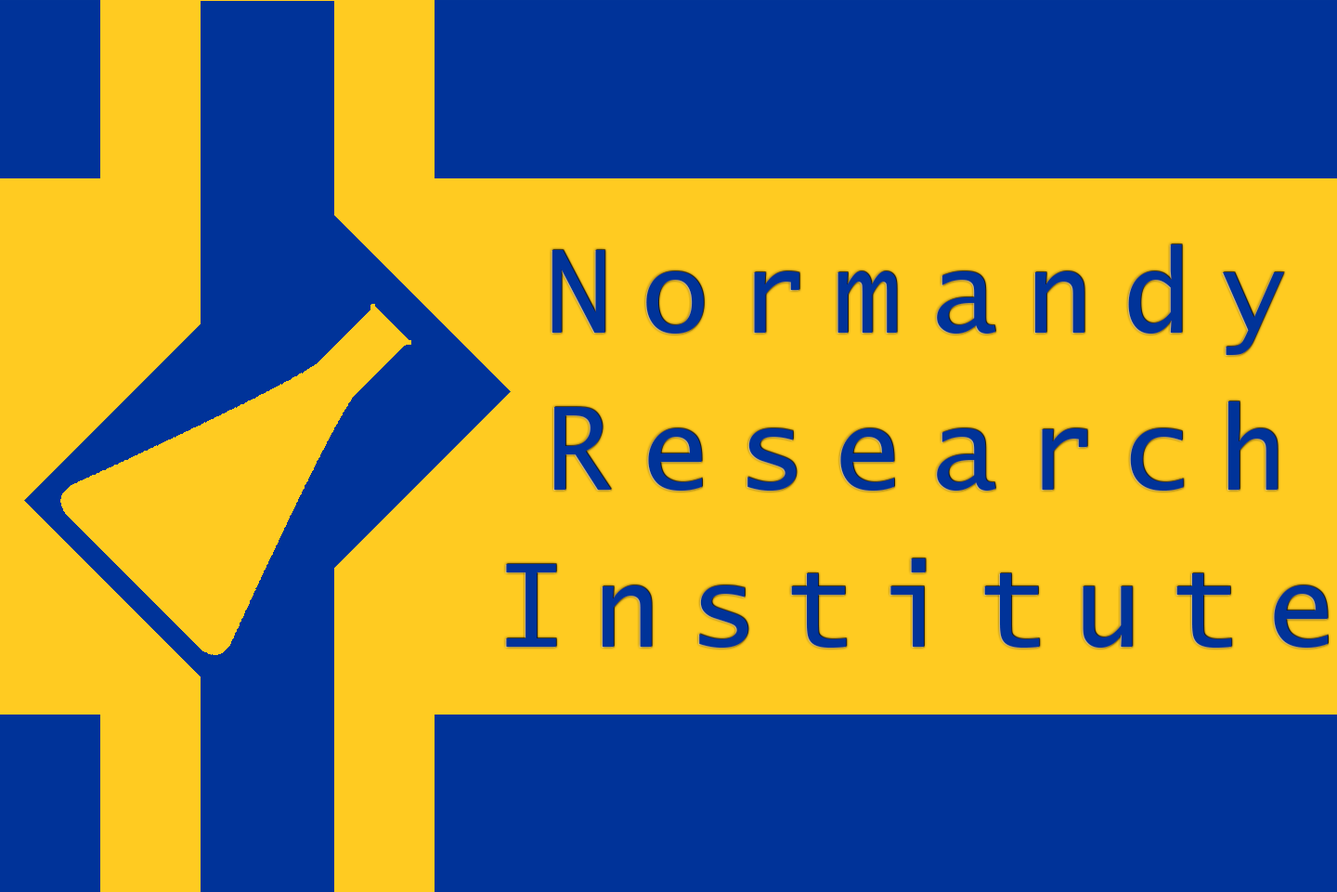
<style>
.page{position:relative;width:1337px;height:892px;background:#ffcb21}
.page>*{position:absolute;margin:0}
.t1{font:114.2px/157px "LucidaSans-Typewriter";letter-spacing:0.24em;color:#003399}
</style>
<div class="page">
<p class="t1" style="left:506px;top:244px;width:822px;height:403px;text-align:center">Normandy<br>Research<br>Institute</p>
</div>
